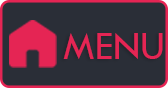
<style>
.page{position:relative;width:168px;height:88px;background:#2a2e37}
.page>*{position:absolute;margin:0}
.t1{font:40.9px "TwCenMT-Regular";color:#e52554}
</style>
<div class="page">
<p class="t1" style="left:63px;top:33px;width:100px;height:26px">MENU</p>
</div>
